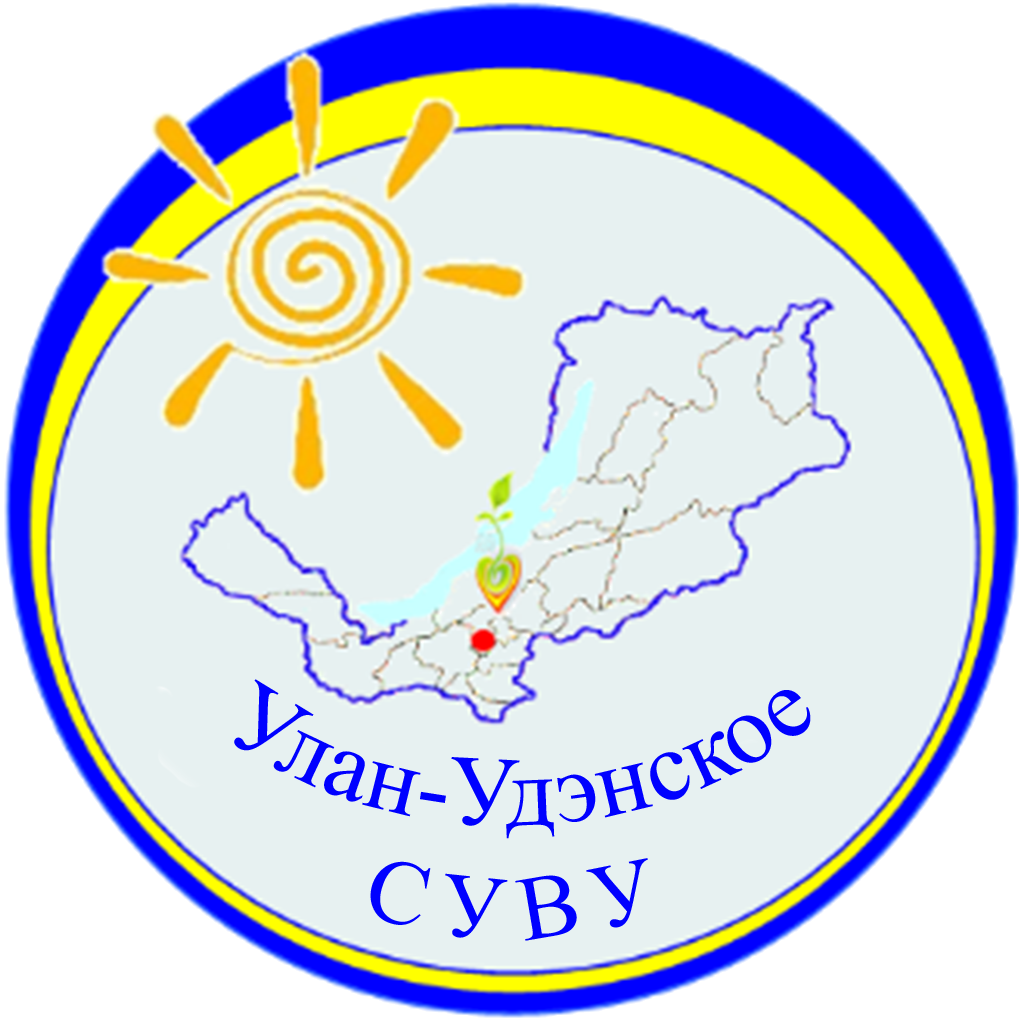
<style>
.page{position:relative;width:1019px;height:1019px;background:#e7f1f1}
.page>*{position:absolute;margin:0}
.t1{font:100px "TimesNewRomanPSMT";letter-spacing:0.01em;color:#0000ff}
.t2{font:91.7px "TimesNewRomanPSMT";letter-spacing:0.22em;color:#0000ff}
</style>
<div class="page">
<p class="t1" style="left:234px;top:679px;width:577px;height:160px">Улан-Удэнское</p>
<p class="t2" style="left:370px;top:858px;width:278px;height:83px">СУВУ</p>
</div>
